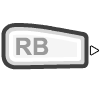
<style>
.page{position:relative;width:100px;height:100px;background:#ffffff}
.page>*{position:absolute;margin:0}
.t1{font:24px "Arial-BoldMT";color:#9a9a9a}
</style>
<div class="page">
<p class="t1" style="left:16px;top:37px;width:33px;height:18px">RB</p>
</div>
